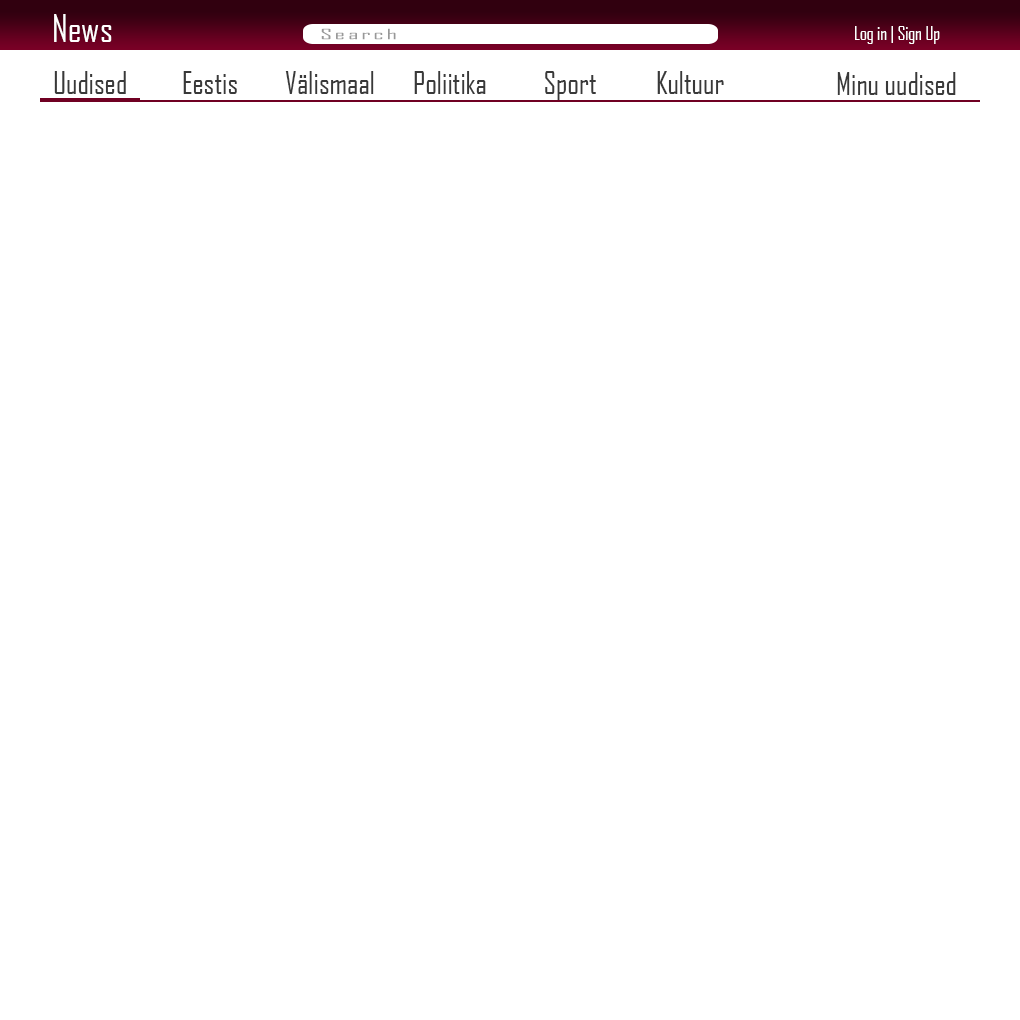
<style>
.page{position:relative;width:1020px;height:1020px;background:#ffffff}
.page>*{position:absolute;margin:0}
.t1{font:36px "AgencyFB-Reg";color:#ffffff}
.t2{font:13.9px "AgencyFB-Reg";letter-spacing:0.1em;color:#989898;scale:2.03 1}
.t3{font:17.6px "AgencyFB-Reg";color:#ffffff}
.t4{font:30px "AgencyFB-Reg";color:#393939}
.t5{font:29.6px "AgencyFB-Reg";color:#393939}
</style>
<div class="page">
<p class="t1" style="left:54px;top:14px;width:58px;height:28px">News</p>
<p class="t2" style="left:321px;top:28px;width:75px;height:12px">Search</p>
<p class="t3" style="left:855px;top:26px;width:85px;height:18px">Log in | Sign Up</p>
<p class="t4" style="left:54px;top:71px;width:72px;height:23px">Uudised</p>
<p class="t4" style="left:183px;top:71px;width:54px;height:23px">Eestis</p>
<p class="t4" style="left:285px;top:71px;width:89px;height:23px">Välismaal</p>
<p class="t4" style="left:414px;top:71px;width:72px;height:23px">Poliitika</p>
<p class="t4" style="left:545px;top:71px;width:51px;height:29px">Sport</p>
<p class="t4" style="left:657px;top:71px;width:67px;height:23px">Kultuur</p>
<p class="t5" style="left:837px;top:72px;width:119px;height:23px">Minu uudised</p>
</div>
